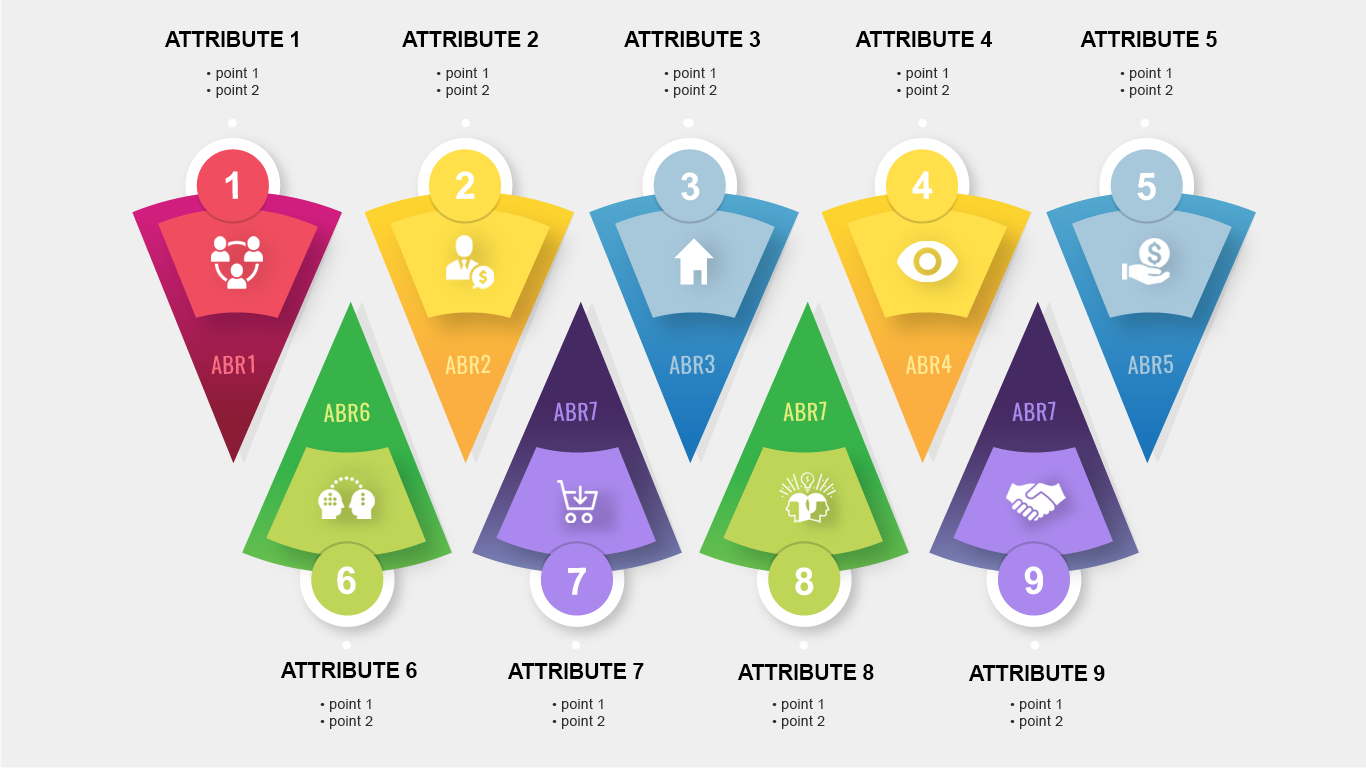
<style>
.page{position:relative;width:1366px;height:768px;background:#efefef}
.page>*{position:absolute;margin:0}
.t1{font:22px "Arial-BoldMT";letter-spacing:-0.02em;color:#000000}
.t2{font:14px "ArialMT";letter-spacing:0.02em;color:#2d2d2d}
.t3{font:38px "Arial-BoldMT";letter-spacing:-0.04em;color:#ffffff}
.t4{font:22.3px "Oswald-Regular";letter-spacing:0.02em;color:#f96e83}
.t5{font:22.3px "Oswald-Regular";letter-spacing:0.02em;color:#ffea92}
.t6{font:22.3px "Oswald-Regular";letter-spacing:0.02em;color:#a7c7db}
.t7{font:22.3px "Oswald-Regular";letter-spacing:0.02em;color:#aa88ed}
.t8{font:22.3px "Oswald-Regular";letter-spacing:0.02em;color:#deef7b}
</style>
<div class="page">
<p class="t1" style="left:164px;top:31px;width:134px;height:16px">ATTRIBUTE 1</p>
<p class="t1" style="left:402px;top:31px;width:136px;height:16px">ATTRIBUTE 2</p>
<p class="t1" style="left:624px;top:31px;width:136px;height:16px">ATTRIBUTE 3</p>
<p class="t1" style="left:855px;top:31px;width:137px;height:16px">ATTRIBUTE 4</p>
<p class="t1" style="left:1080px;top:31px;width:137px;height:16px">ATTRIBUTE 5</p>
<p class="t2" style="left:206px;top:67px;width:53px;height:31px;text-align:center">• point 1<br>• point 2</p>
<p class="t2" style="left:436px;top:67px;width:53px;height:31px;text-align:center">• point 1<br>• point 2</p>
<p class="t2" style="left:664px;top:67px;width:53px;height:31px;text-align:center">• point 1<br>• point 2</p>
<p class="t2" style="left:897px;top:67px;width:52px;height:31px;text-align:center">• point 1<br>• point 2</p>
<p class="t2" style="left:1120px;top:67px;width:53px;height:31px;text-align:center">• point 1<br>• point 2</p>
<p class="t3" style="left:225px;top:171px;width:13px;height:28px">1</p>
<p class="t3" style="left:456px;top:171px;width:19px;height:28px">2</p>
<p class="t3" style="left:681px;top:172px;width:19px;height:29px">3</p>
<p class="t3" style="left:912px;top:171px;width:21px;height:28px">4</p>
<p class="t3" style="left:1137px;top:172px;width:19px;height:29px">5</p>
<p class="t4" style="left:211px;top:354px;width:43px;height:20px">ABR1</p>
<p class="t5" style="left:445px;top:354px;width:46px;height:20px">ABR2</p>
<p class="t6" style="left:669px;top:354px;width:46px;height:20px">ABR3</p>
<p class="t5" style="left:906px;top:354px;width:46px;height:20px">ABR4</p>
<p class="t6" style="left:1128px;top:354px;width:45px;height:20px">ABR5</p>
<p class="t7" style="left:554px;top:401px;width:43px;height:20px">ABR7</p>
<p class="t8" style="left:783px;top:401px;width:44px;height:20px">ABR7</p>
<p class="t7" style="left:1012px;top:401px;width:44px;height:20px">ABR7</p>
<p class="t8" style="left:324px;top:402px;width:46px;height:20px">ABR6</p>
<p class="t3" style="left:337px;top:566px;width:19px;height:29px">6</p>
<p class="t3" style="left:568px;top:567px;width:18px;height:28px">7</p>
<p class="t3" style="left:795px;top:567px;width:19px;height:29px">8</p>
<p class="t3" style="left:1024px;top:566px;width:19px;height:29px">9</p>
<p class="t1" style="left:280px;top:662px;width:137px;height:16px">ATTRIBUTE 6</p>
<p class="t1" style="left:507px;top:663px;width:137px;height:16px">ATTRIBUTE 7</p>
<p class="t1" style="left:737px;top:664px;width:137px;height:16px">ATTRIBUTE 8</p>
<p class="t1" style="left:968px;top:665px;width:137px;height:16px">ATTRIBUTE 9</p>
<p class="t2" style="left:320px;top:698px;width:53px;height:31px;text-align:center">• point 1<br>• point 2</p>
<p class="t2" style="left:552px;top:698px;width:53px;height:31px;text-align:center">• point 1<br>• point 2</p>
<p class="t2" style="left:772px;top:698px;width:53px;height:31px;text-align:center">• point 1<br>• point 2</p>
<p class="t2" style="left:1010px;top:698px;width:53px;height:31px;text-align:center">• point 1<br>• point 2</p>
</div>
